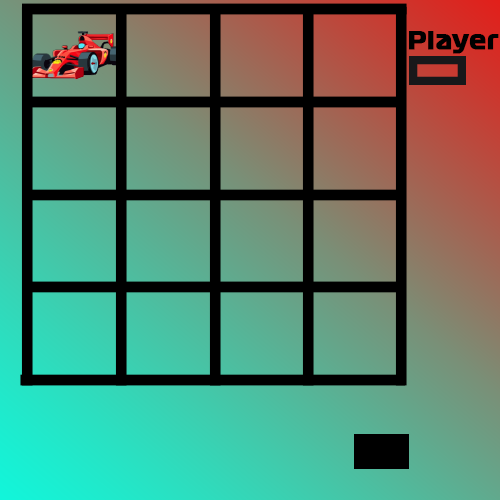
<style>
.page{position:relative;width:500px;height:500px}
.page>*{position:absolute;margin:0}
.t1{font:24px "Formula1-Display-Bold";color:#000000;font-weight:bold}
</style>
<div class="page">
<p class="t1" style="left:409px;top:31px;width:90px;height:23px">Player</p>
</div>
